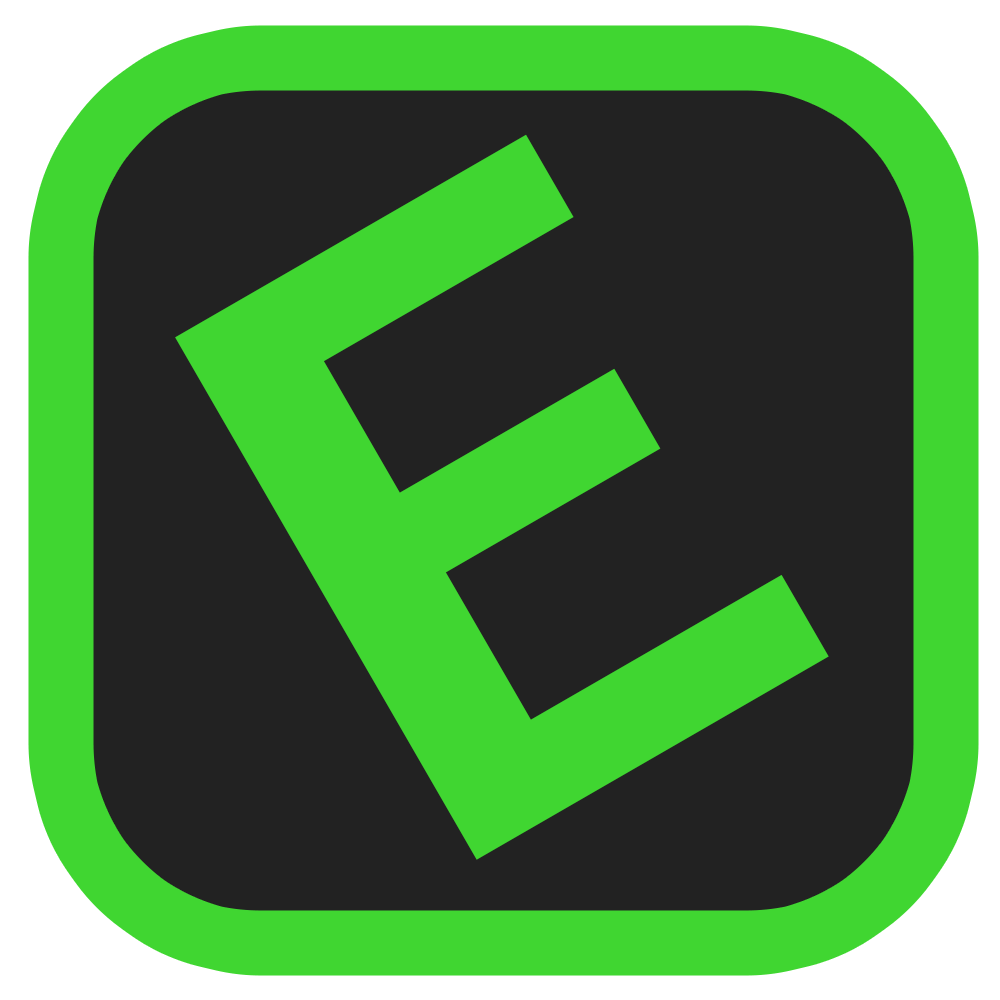
<style>
.page{position:relative;width:1000px;height:1000px;background:#222222}
.page>*{position:absolute;margin:0}
.t1{font:848.2px "RobotoMono-Bold";color:#40d631}
</style>
<div class="page">
<p class="t1" style="left:175px;top:134px;width:654px;height:726px;rotate:-30deg">E</p>
</div>
